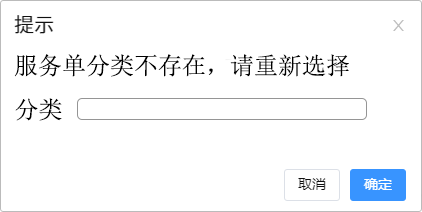
<style>
.page{position:relative;width:422px;height:212px;background:#ffffff}
.page>*{position:absolute;margin:0}
.t1{font:24px "SimSun";color:#000000}
</style>
<div class="page">
<p class="t1" style="left:14px;top:54px;width:335px;height:23px">服务单分类不存在，请重新选择</p>
<p class="t1" style="left:15px;top:98px;width:47px;height:23px">分类</p>
</div>
